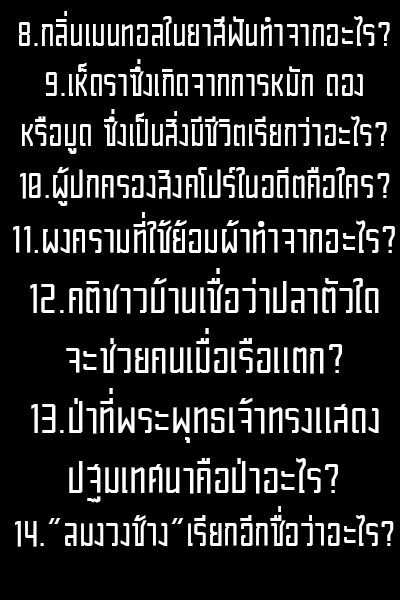
<style>
.page{position:relative;width:400px;height:600px;background:#000000}
.page>*{position:absolute;margin:0}
.t1{font:41.7px "Block-Regular";color:#ffffff}
.t2{font:43.8px "Block-Regular";color:#ffffff}
.t3{font:45.8px "Block-Regular";color:#ffffff}
.t4{font:50px "Block-Regular";color:#ffffff}
</style>
<div class="page">
<p class="t1" style="left:13px;top:11px;width:382px;height:536px;text-align:center">8.กลิ่นเมนทอลในยาสีฟันทำจากอะไร?<br>9.เห็ดราซึ่งเกิดจากการหมัก ดอง หรือบูด ซึ่งเป็นสิ่งมีชีวิตเรียกว่าอะไร?<br><span class="t2">10.ผู้ปกครองสิงคโปร์ในอดีตคือใคร?<br></span><span class="t3">11.ผงครามที่ใช้ย้อมผ้าทำจากอะไร?<br></span><span class="t4">12.คติชาวบ้านเชื่อว่าปลาตัวใด<br>จะช่วยคนเมื่อเรือแตก?<br>13.ป่าที่พระพุทธเจ้าทรงแสดง<br>ปฐมเทศนาคือป่าอะไร?<br></span><span class="t2">14.”ลมงวงช้าง”เรียกอีกชื่อว่าอะไร?</span></p>
</div>
